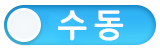
<style>
.page{position:relative;width:160px;height:50px;background:#ffffff}
.page>*{position:absolute;margin:0}
.t1{font:33.3px "12LotteMartDreamBold";letter-spacing:0.2em;color:#ffffff}
</style>
<div class="page">
<p class="t1" style="left:58px;top:10px;width:66px;height:31px">수동</p>
</div>
